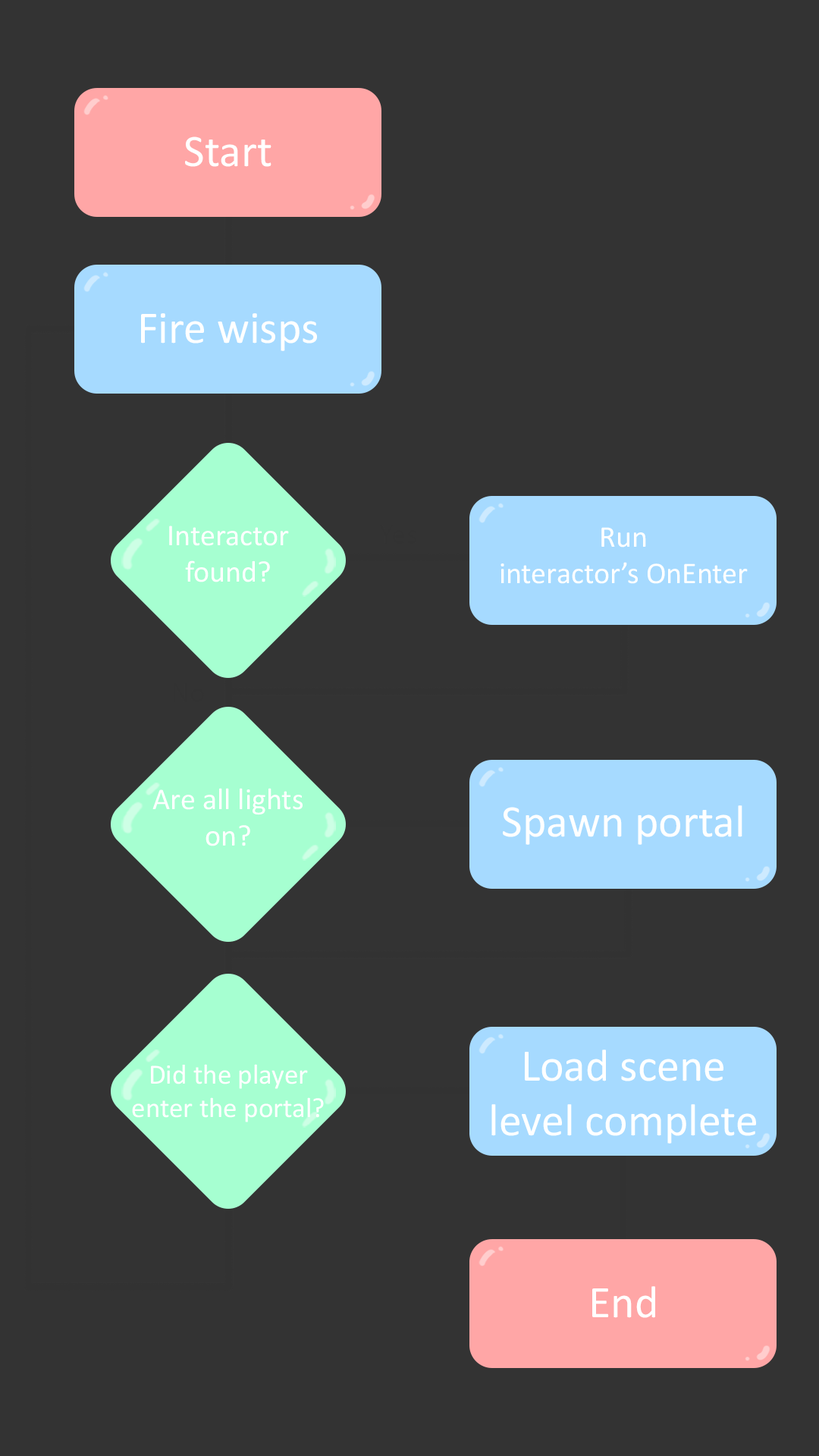
<style>
.page{position:relative;width:819px;height:1456px;background:#333333}
.page>*{position:absolute;margin:0}
.t1{font:45.5px "Calibri";color:#ffffff}
.t2{font:30.3px "Calibri";color:#ffffff}
.t3{font:28.1px "Calibri";color:#ffffff}
</style>
<div class="page">
<p class="t1" style="left:185px;top:136px;width:86px;height:31px">Start</p>
<p class="t1" style="left:141px;top:313px;width:176px;height:38px">Fire wisps</p>
<p class="t2" style="left:169px;top:526px;width:120px;height:56px;text-align:center">Interactor found?</p>
<p class="t2" style="left:500px;top:527px;width:248px;height:57px;text-align:center">Run <br>interactor’s OnEnter</p>
<p class="t2" style="left:152px;top:788px;width:151px;height:58px;text-align:center">Are all lights on?</p>
<p class="t1" style="left:503px;top:805px;width:239px;height:40px">Spawn portal</p>
<p class="t1" style="left:491px;top:1050px;width:265px;height:94px;text-align:center">Load scene level complete</p>
<p class="t3" style="left:132px;top:1064px;width:192px;height:58px;text-align:center">Did the player<br>enter the portal?</p>
<p class="t1" style="left:592px;top:1286px;width:63px;height:32px">End</p>
</div>
